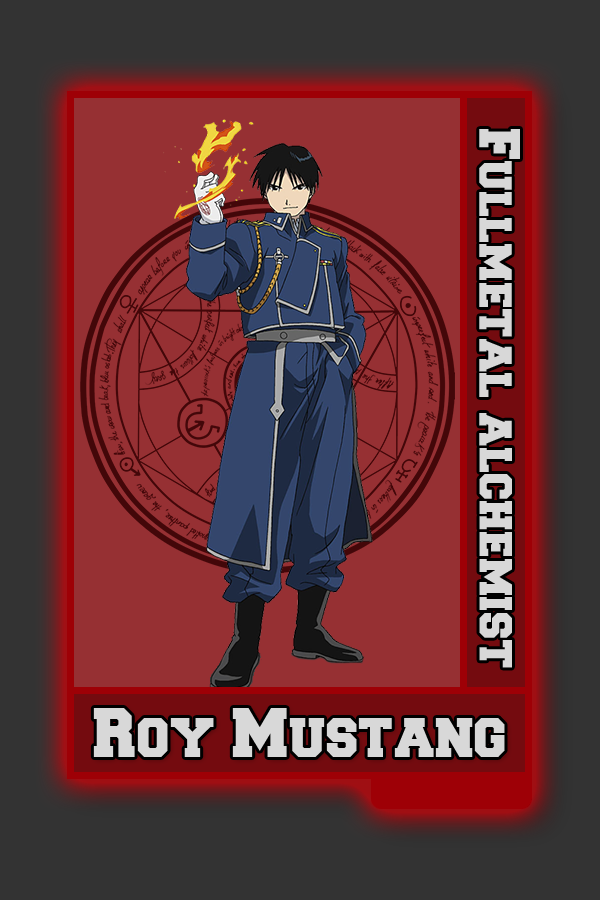
<style>
.page{position:relative;width:600px;height:900px;background:#963033}
.page>*{position:absolute;margin:0}
.t1{font:48.8px "Freshman";color:#d8d8d8}
.t2{font:58.3px "Freshman";color:#d8d8d8}
</style>
<div class="page">
<p class="t1" style="left:479px;top:129px;width:41px;height:539px;rotate:90deg">Fullmetal alchemist</p>
<p class="t2" style="left:93px;top:708px;width:412px;height:49px">Roy Mustang</p>
</div>
